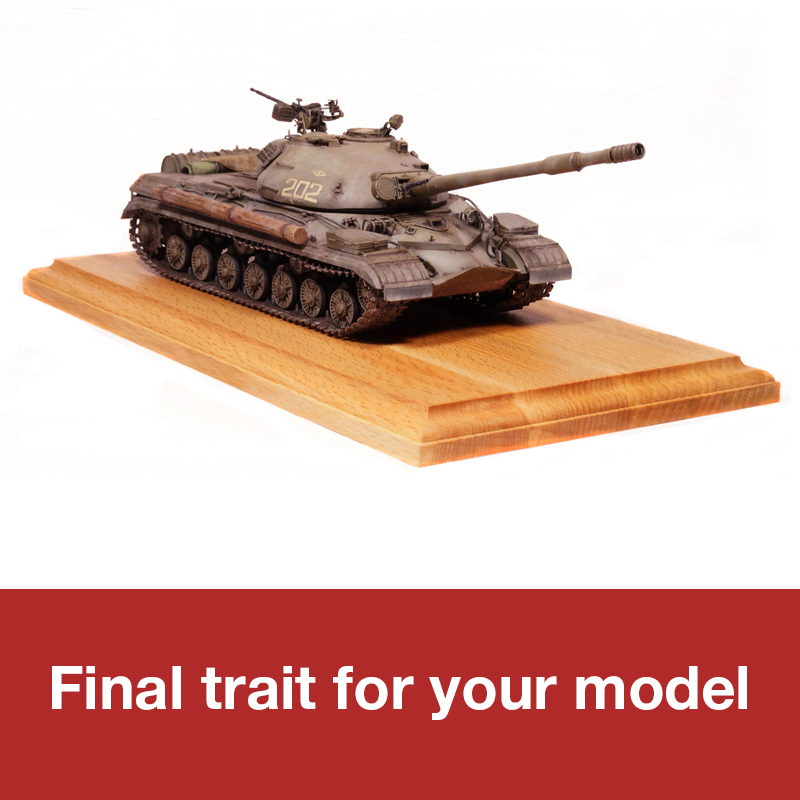
<style>
.page{position:relative;width:800px;height:800px;background:#ffffff}
.page>*{position:absolute;margin:0}
.t1{font:60px "HelveticaNeueCyr-Bold";color:#ffffff}
</style>
<div class="page">
<p class="t1" style="left:52px;top:666px;width:695px;height:54px">Final trait for your model</p>
</div>
